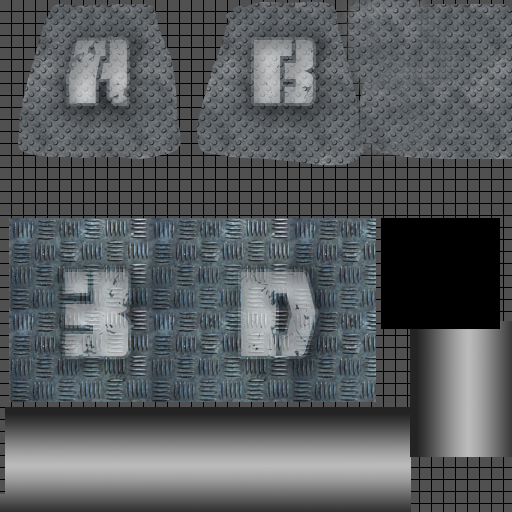
<style>
.page{position:relative;width:512px;height:512px;background:#505050}
.page>*{position:absolute;margin:0}
.t1{font:90px "FireFightBB";color:#9e9fa0}
.t2{font:90px "FireFightBB";color:#a1a3a4}
.t3{font:120px "FireFightBB";color:#a0a5a7}
.t4{font:120px "FireFightBB";color:#9da1a4}
</style>
<div class="page">
<p class="t1" style="left:68px;top:39px;width:59px;height:65px">A</p>
<p class="t2" style="left:253px;top:40px;width:60px;height:63px">B</p>
<p class="t3" style="left:65px;top:271px;width:64px;height:86px">3</p>
<p class="t4" style="left:241px;top:272px;width:75px;height:85px">d</p>
</div>
